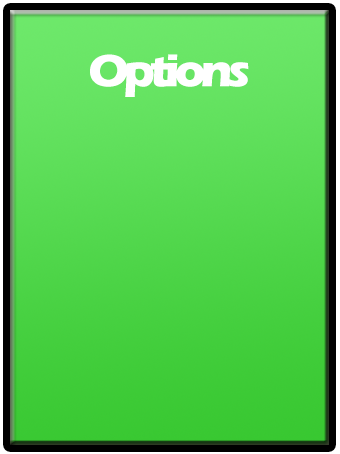
<style>
.page{position:relative;width:340px;height:454px}
.page>*{position:absolute;margin:0}
.t1{font:80px "ErasITC-Bold";letter-spacing:-0.1em;color:#ffffff}
.t2{font:60px "ErasITC-Bold";letter-spacing:-0.1em;color:#ffffff}
</style>
<div class="page">
<p class="t1" style="left:90px;top:54px;width:159px;height:43px"><span class="t2"><br><br></span><br><br>Options</p>
</div>
